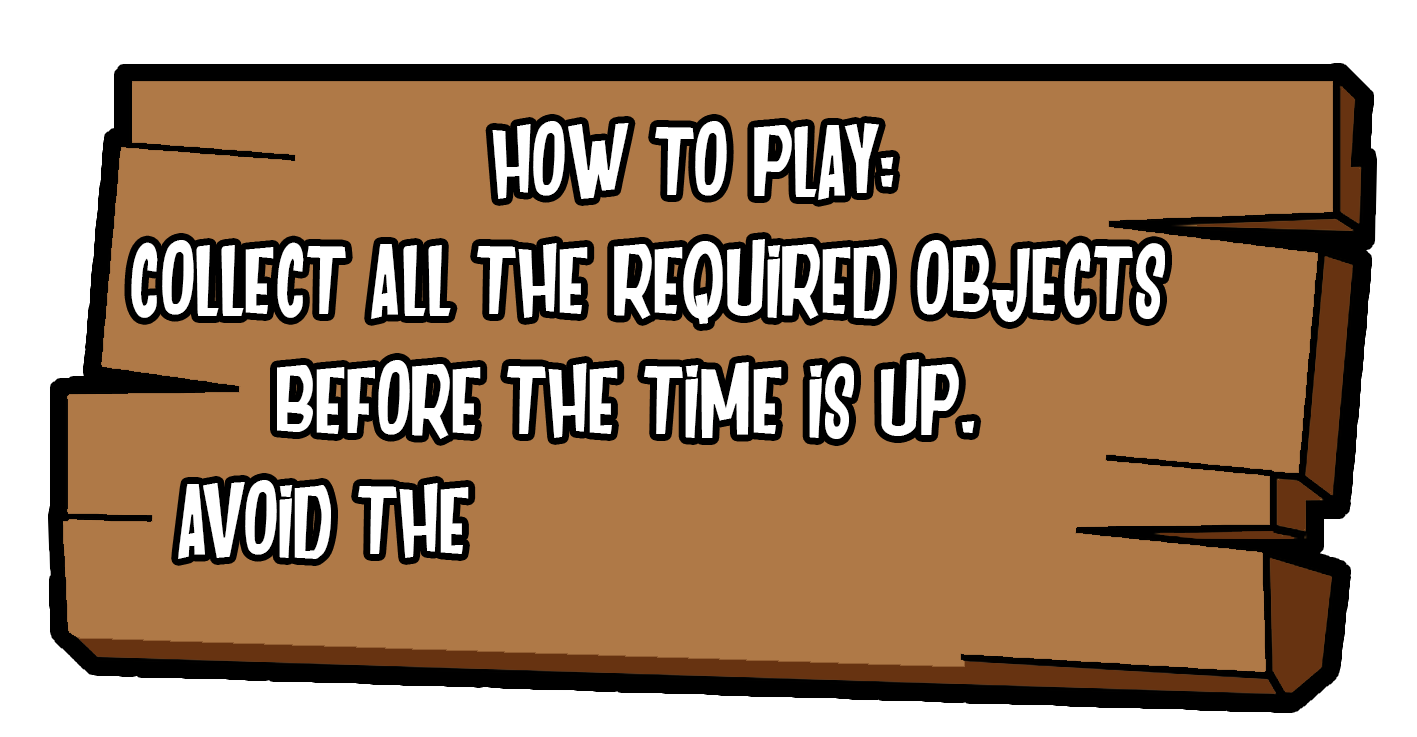
<style>
.page{position:relative;width:1417px;height:737px;background:#af7947}
.page>*{position:absolute;margin:0}
.t1{font:100px "DANCING-JUNGLE";color:#ffffff}
</style>
<div class="page">
<p class="t1" style="left:492px;top:121px;width:402px;height:79px">HOW TO PLAY:</p>
<p class="t1" style="left:131px;top:239px;width:1034px;height:320px">COLLECT ALL THE REQUIRED OBJECTS <br>      BEFORE THE TIME IS UP.<br>  AVOID THE</p>
</div>
